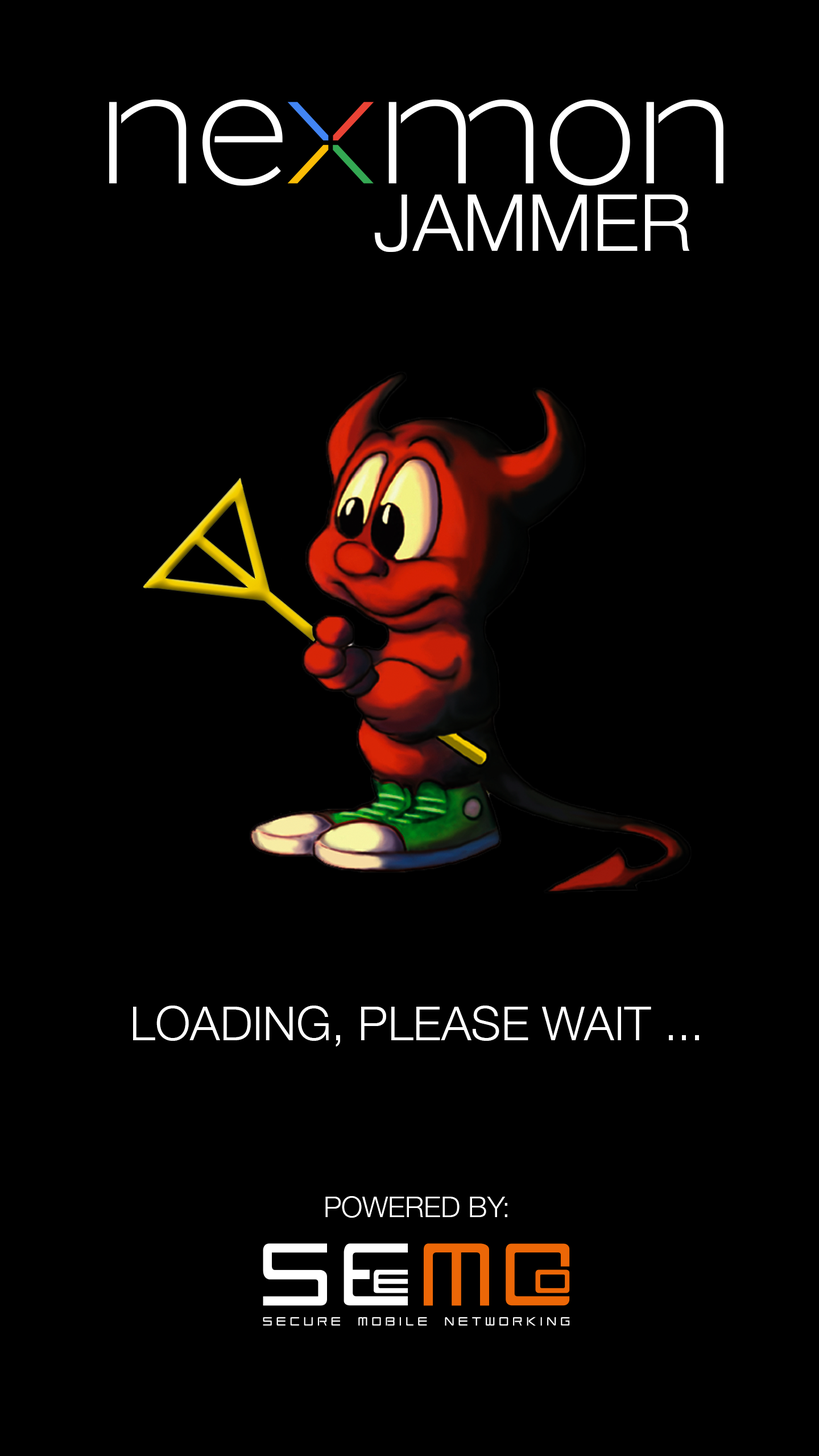
<style>
.page{position:relative;width:819px;height:1456px;background:#000000}
.page>*{position:absolute;margin:0}
.t1{font:79px "HelveticaNeue-Light";color:#ffffff}
.t2{font:47.4px "HelveticaNeue-Light";color:#ffffff}
.t3{font:28.4px "HelveticaNeue-Light";color:#ffffff}
</style>
<div class="page">
<p class="t1" style="left:374px;top:195px;width:316px;height:57px">JAMMER</p>
<p class="t2" style="left:133px;top:1006px;width:566px;height:40px">LOADING, PLEASE WAIT ...</p>
<p class="t3" style="left:325px;top:1196px;width:182px;height:22px">POWERED BY:</p>
</div>
